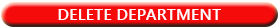
<style>
.page{position:relative;width:280px;height:28px;background:#f60b0b}
.page>*{position:absolute;margin:0}
.t1{font:16.4px "YuGothicUI-Bold";color:#ffffff}
</style>
<div class="page">
<p class="t1" style="left:58px;top:9px;width:163px;height:11px">DELETE DEPARTMENT</p>
</div>
